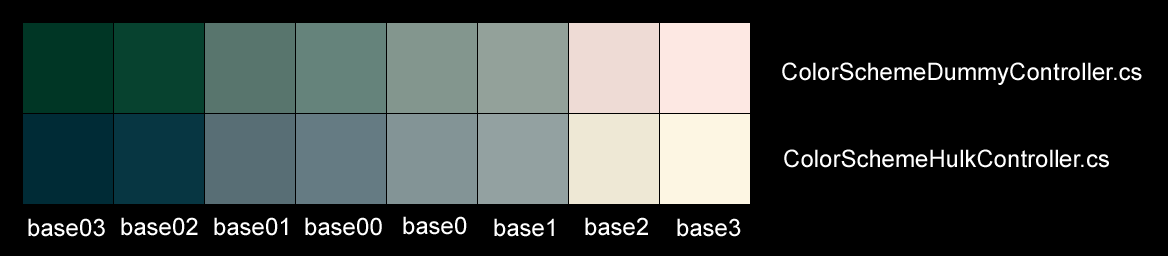
<style>
.page{position:relative;width:1168px;height:256px;background:#000000}
.page>*{position:absolute;margin:0}
.t1{font:24px "ArialMT";color:#ffffff}
</style>
<div class="page">
<p class="t1" style="left:782px;top:62px;width:360px;height:23px">ColorSchemeDummyController.cs</p>
<p class="t1" style="left:784px;top:149px;width:325px;height:19px">ColorSchemeHulkController.cs</p>
<p class="t1" style="left:28px;top:218px;width:77px;height:19px">base03</p>
<p class="t1" style="left:121px;top:217px;width:77px;height:19px">base02</p>
<p class="t1" style="left:214px;top:217px;width:74px;height:19px">base01</p>
<p class="t1" style="left:305px;top:217px;width:77px;height:19px">base00</p>
<p class="t1" style="left:403px;top:216px;width:64px;height:19px">base0</p>
<p class="t1" style="left:494px;top:218px;width:60px;height:19px">base1</p>
<p class="t1" style="left:585px;top:217px;width:63px;height:19px">base2</p>
<p class="t1" style="left:677px;top:218px;width:64px;height:19px">base3</p>
</div>
